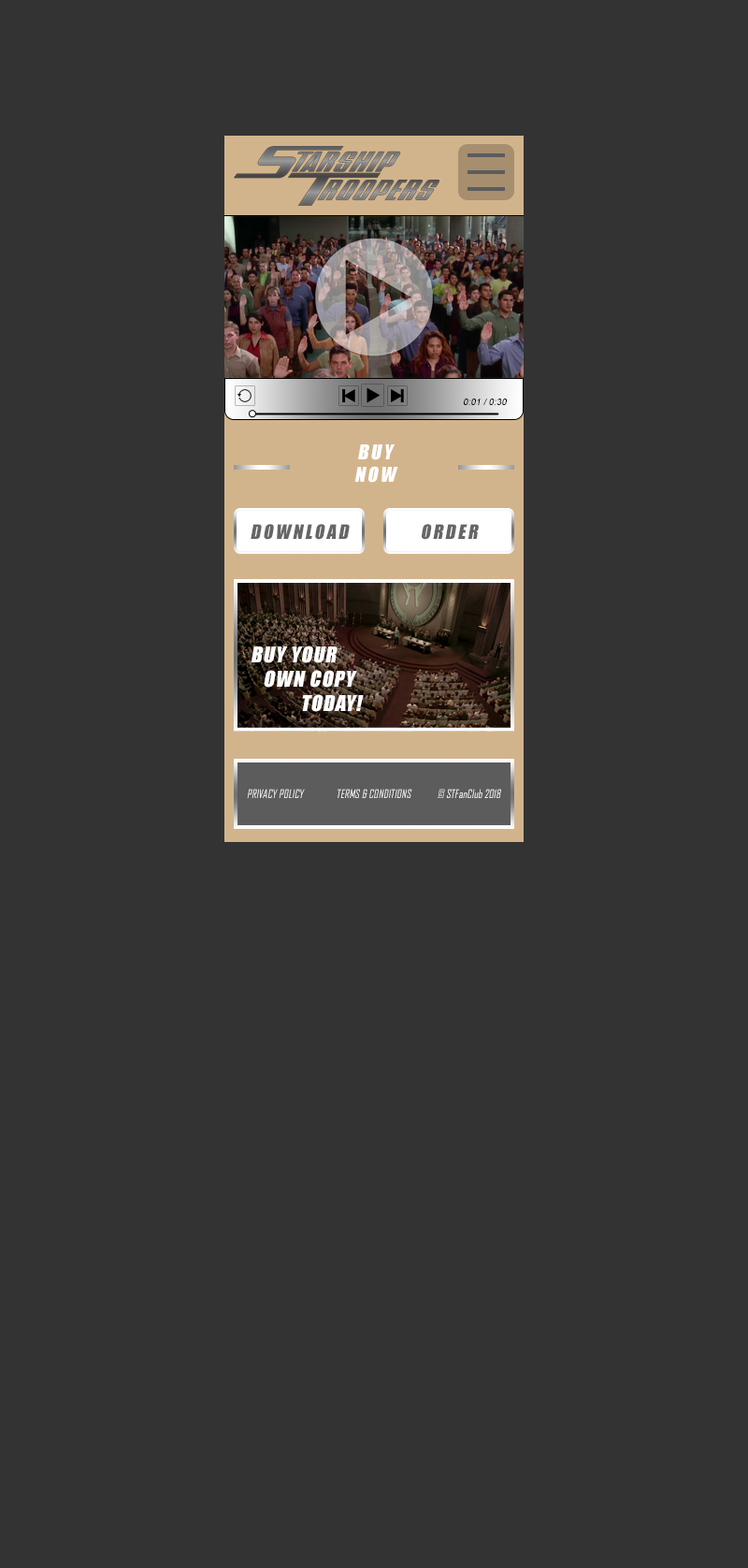
<style>
.page{position:relative;width:748px;height:1568px;background:#333333}
.page>*{position:absolute;margin:0}
.t1{font:9.2px "ArialMT";color:#000000;font-style:italic}
.t2{font:19px "Impact";letter-spacing:0.125em;color:#fefefe;font-style:italic}
.t3{font:18.3px "Impact";letter-spacing:0.125em;color:#666666;font-style:italic}
.t4{font:20.2px "Impact";letter-spacing:0.05em;color:#fefefe;font-style:italic}
.t5{font:11.2px "AgencyFB-Reg";color:#ffffff;font-style:italic}
</style>
<div class="page">
<p class="t1" style="left:464px;top:399px;width:43px;height:6px">0:01 / 0:30</p>
<p class="t2" style="left:355px;top:444px;width:44px;height:39px;text-align:center">BUY<br>NOW</p>
<p class="t3" style="left:251px;top:524px;width:99px;height:16px">DOWNLOAD</p>
<p class="t3" style="left:422px;top:524px;width:57px;height:16px">ORDER</p>
<p class="t4" style="left:251px;top:646px;width:113px;height:66px">BUY YOUR<br> OWN COPY<br>    TODAY!</p>
<p class="t5" style="left:247px;top:789px;width:254px;height:9px">PRIVACY POLICY             TERMS &amp; CONDITIONS            © STFanClub 2018</p>
</div>
